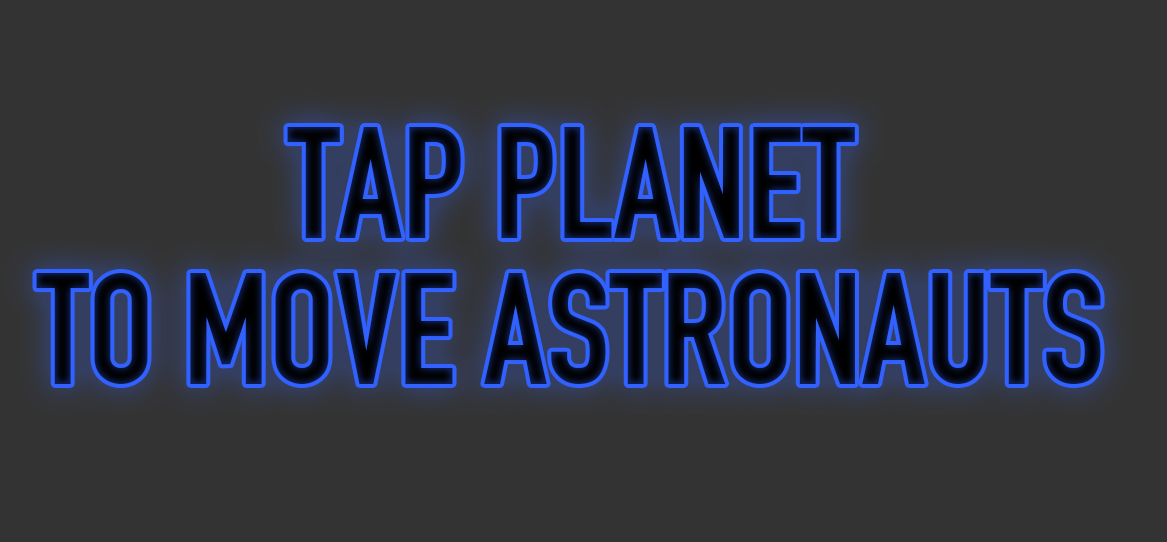
<style>
.page{position:relative;width:1167px;height:542px;background:#333333}
.page>*{position:absolute;margin:0}
.t1{font:154.9px/145.2px "DINEngschrift";text-transform:uppercase}
</style>
<div class="page">
<p class="t1" style="left:36px;top:127px;width:1065px;height:257px;text-align:center">Tap planet <br>to move astronautS</p>
</div>
